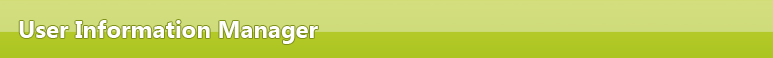
<style>
.page{position:relative;width:773px;height:58px}
.page>*{position:absolute;margin:0}
.t1{font:24px "SegoeUI-Bold";color:#fefefe}
</style>
<div class="page">
<p class="t1" style="left:19px;top:20px;width:299px;height:24px">User Information Manager</p>
</div>
